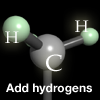
<style>
.page{position:relative;width:100px;height:100px;background:#000000}
.page>*{position:absolute;margin:0}
.t1{font:16.6px "BookAntiqua";color:#ffffff}
.t2{font:23.5px "BookAntiqua";color:#ffffff}
.t3{font:12px "HelveticaNeue-Bold";color:#ffffff}
</style>
<div class="page">
<p class="t1" style="left:75px;top:20px;width:14px;height:12px">H</p>
<p class="t1" style="left:5px;top:31px;width:14px;height:12px">H</p>
<p class="t2" style="left:46px;top:54px;width:16px;height:18px">C</p>
<p class="t3" style="left:6px;top:83px;width:86px;height:12px">Add hydrogens</p>
</div>
